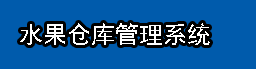
<style>
.page{position:relative;width:256px;height:69px;background:#005bac}
.page>*{position:absolute;margin:0}
.t1{font:24px "SimHei";color:#ffffff}
</style>
<div class="page">
<p class="t1" style="left:20px;top:23px;width:190px;height:22px">水果仓库管理系统</p>
</div>
